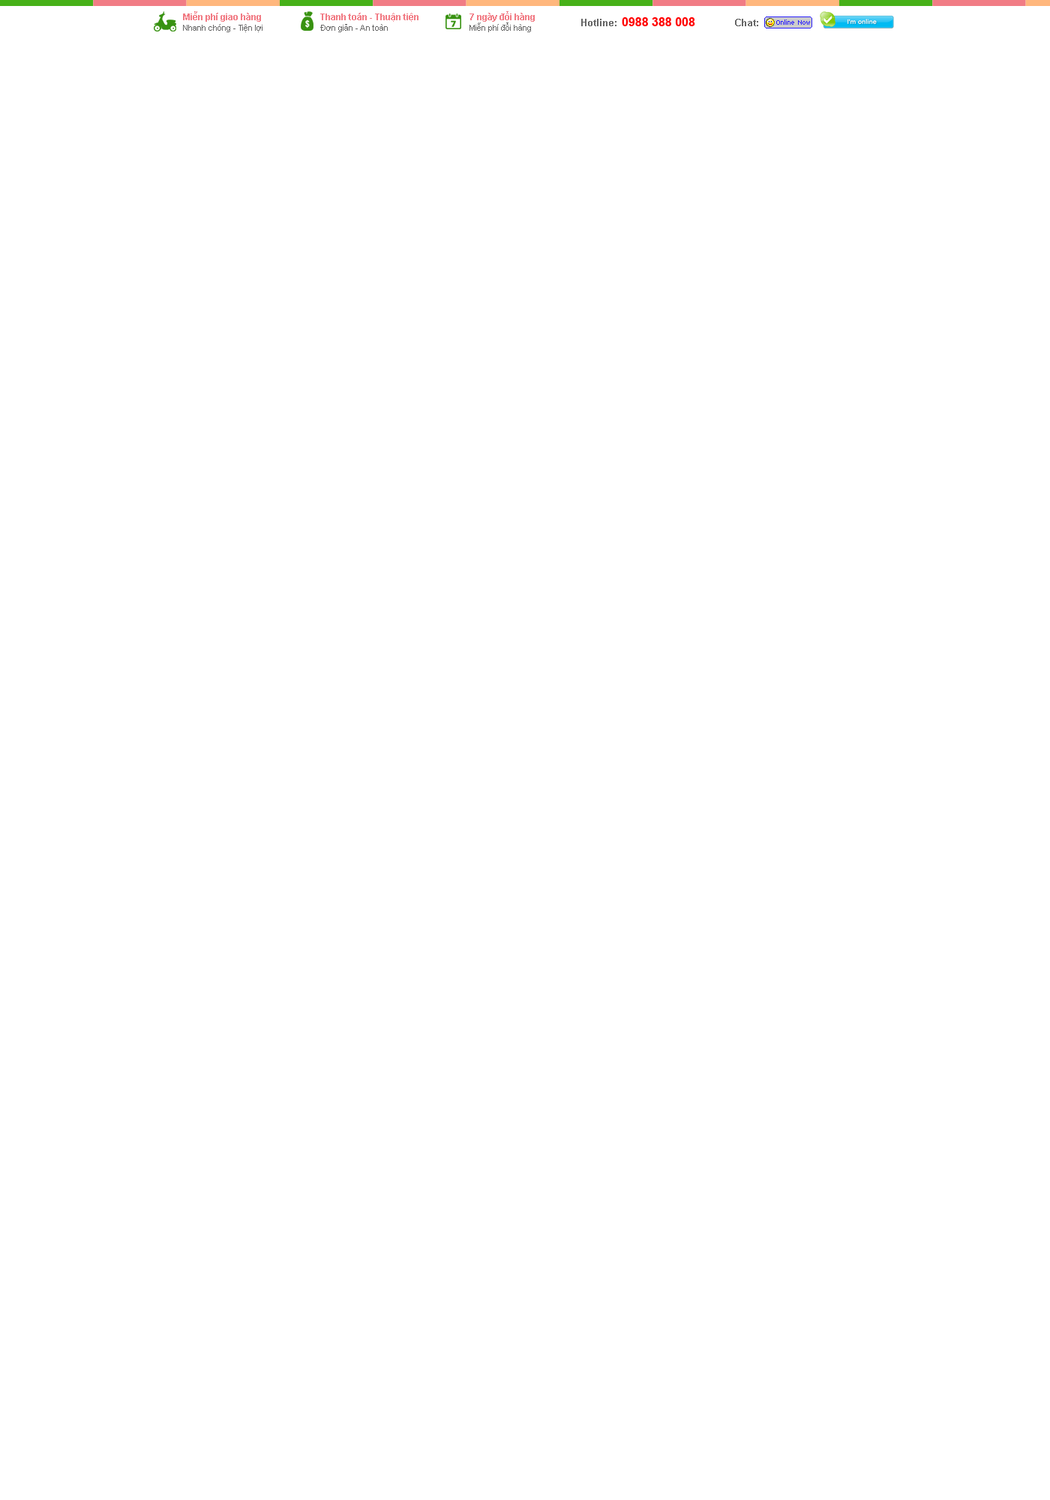
<style>
.page{position:relative;width:1050px;height:1500px;background:#ffffff}
.page>*{position:absolute;margin:0}
.t1{font:9px "Arial-BoldMT";color:#f17c85}
.t2{font:12px "Arial-BoldMT";color:#ff0000}
.t3{font:8.2px "ArialMT";color:#666666}
.t4{font:9.8px "Arial-BoldMT";color:#666666}
</style>
<div class="page">
<p class="t1" style="left:183px;top:11px;width:78px;height:11px">Miễn phí giao hàng</p>
<p class="t1" style="left:320px;top:13px;width:98px;height:9px">Thanh toán - Thuận tiện</p>
<p class="t1" style="left:470px;top:11px;width:65px;height:11px">7 ngày đổi hàng</p>
<p class="t2" style="left:622px;top:17px;width:73px;height:9px">0988 388 008</p>
<p class="t3" style="left:183px;top:24px;width:79px;height:8px">Nhanh chóng - Tiện lợi</p>
<p class="t3" style="left:320px;top:24px;width:68px;height:8px">Đơn giản - An toàn</p>
<p class="t3" style="left:470px;top:22px;width:61px;height:10px">Miễn phí đổi hàng</p>
<p class="t4" style="left:581px;top:19px;width:35px;height:7px">Hotline:</p>
<p class="t4" style="left:735px;top:19px;width:23px;height:7px">Chat:</p>
</div>
